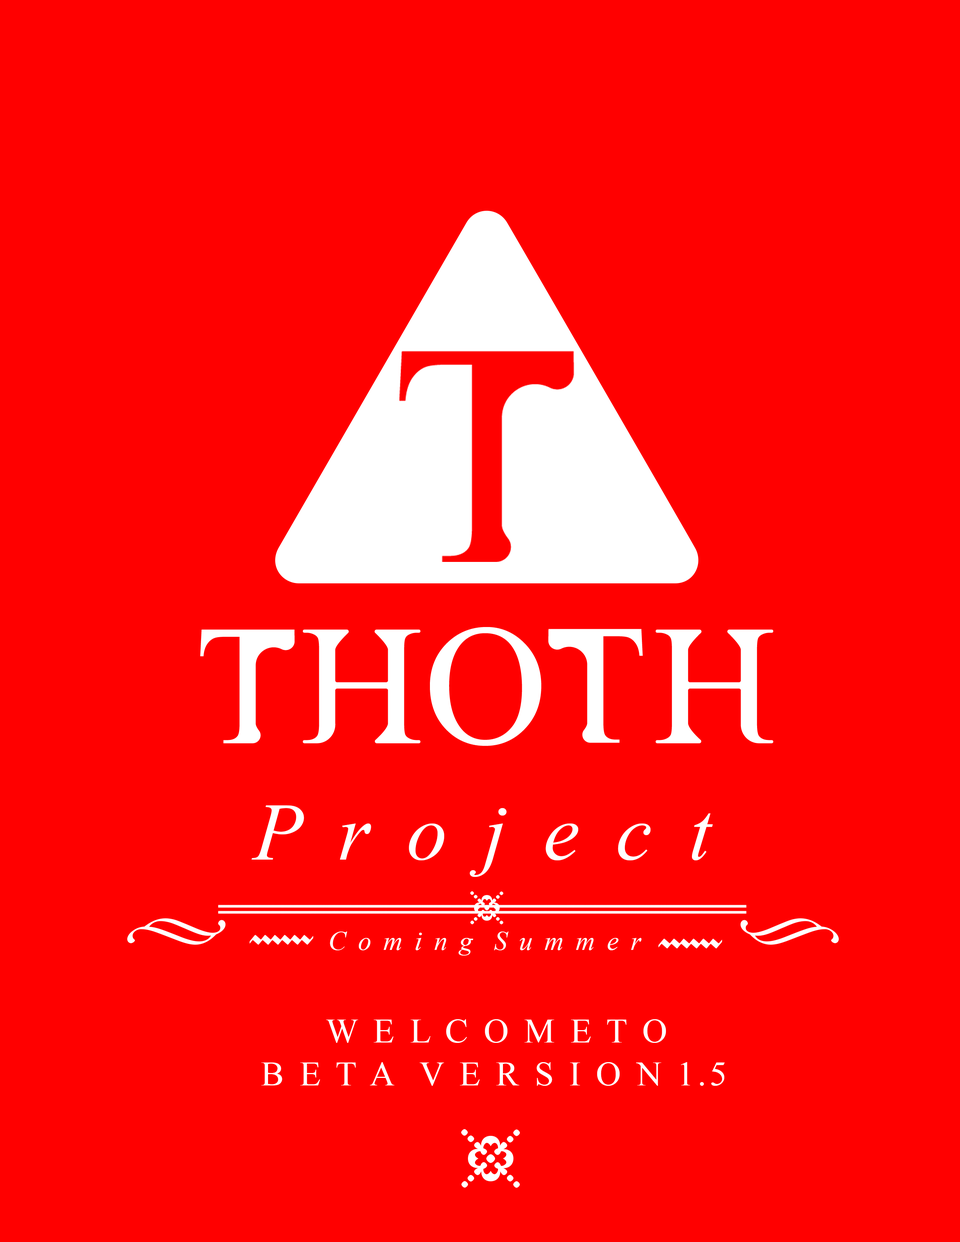
<style>
.page{position:relative;width:960px;height:1242px;background:#ff0000}
.page>*{position:absolute;margin:0}
.t1{font:81.6px "TimesNewRomanPS-ItalicMT";letter-spacing:0.1em;color:#ffffff}
.t2{font:26.7px "TimesNewRomanPS-ItalicMT";letter-spacing:0.1em;color:#ffffff}
.t3{font:34.5px "TimesNewRomanPSMT";letter-spacing:0.1em;color:#ffffff}
</style>
<div class="page">
<p class="t1" style="left:251px;top:805px;width:462px;height:72px">P r o j e c t</p>
<p class="t2" style="left:330px;top:932px;width:311px;height:24px">C o m i n g  S u m m e r</p>
<p class="t3" style="left:326px;top:1019px;width:340px;height:24px">W E L C O M E T O</p>
<p class="t3" style="left:261px;top:1062px;width:464px;height:24px">B E T A  V E R S I O N 1.5</p>
</div>
